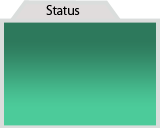
<style>
.page{position:relative;width:160px;height:128px}
.page>*{position:absolute;margin:0}
.t1{font:12px "KozGoPr6N-Regular";color:#020202}
</style>
<div class="page">
<p class="t1" style="left:46px;top:5px;width:34px;height:10px">Status</p>
</div>
